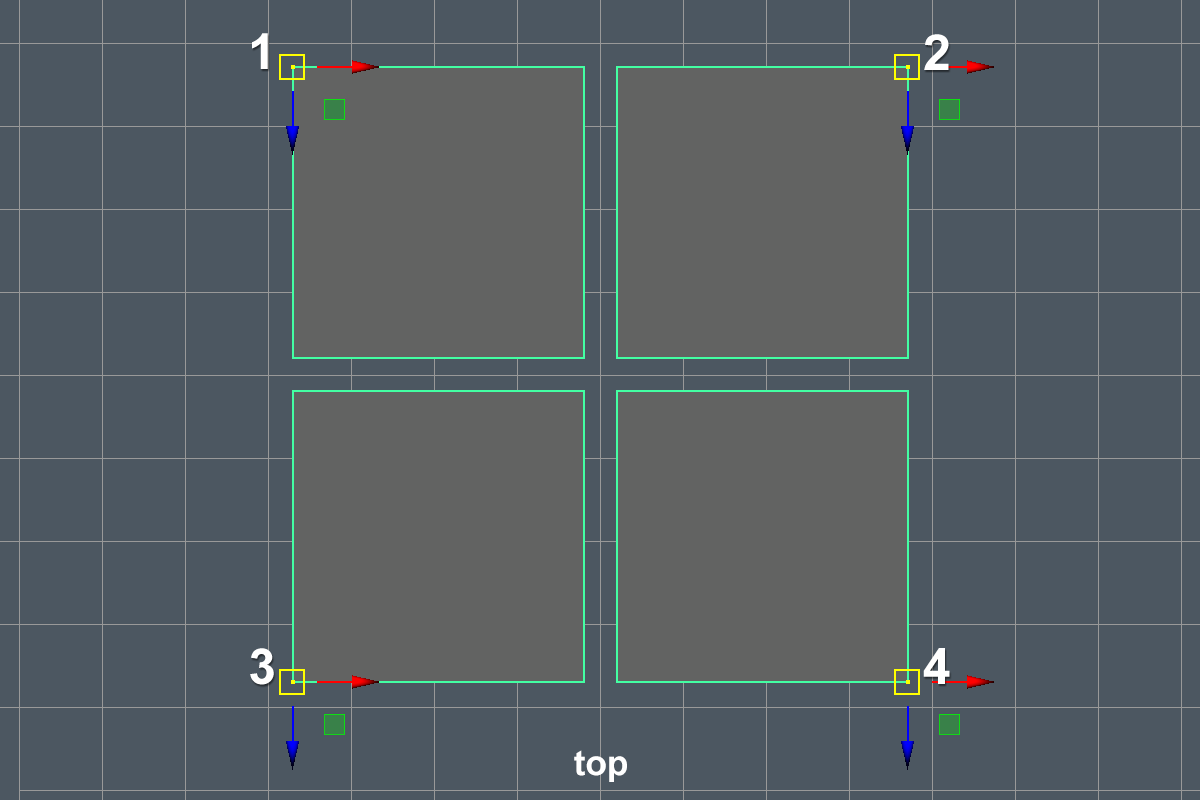
<style>
.page{position:relative;width:1200px;height:800px;background:#4c5761}
.page>*{position:absolute;margin:0}
.t1{font:50px "Arial-BoldMT";color:#ffffff}
.t2{font:35px "Arial-BoldMT";color:#ffffff}
</style>
<div class="page">
<p class="t1" style="left:252px;top:33px;width:16px;height:36px">1</p>
<p class="t1" style="left:924px;top:34px;width:25px;height:36px">2</p>
<p class="t1" style="left:250px;top:648px;width:24px;height:37px">3</p>
<p class="t1" style="left:923px;top:648px;width:27px;height:36px">4</p>
<p class="t2" style="left:574px;top:750px;width:53px;height:32px">top</p>
</div>
